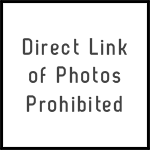
<style>
.page{position:relative;width:150px;height:150px;background:#ffffff}
.page>*{position:absolute;margin:0}
.t1{font:24px "ZagBold";letter-spacing:0.075em;color:#424242}
</style>
<div class="page">
<p class="t1" style="left:22px;top:38px;width:105px;height:74px;text-align:center">Direct Link<br>of Photos<br>Prohibited</p>
</div>
